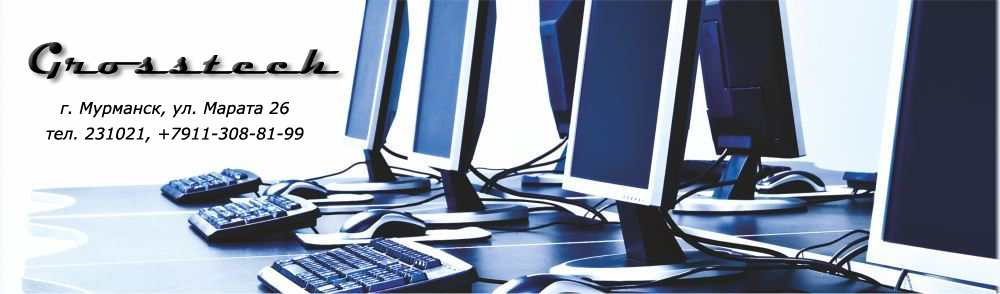
<style>
.page{position:relative;width:1000px;height:294px}
.page>*{position:absolute;margin:0}
.t1{font:16px "Verdana-Italic";color:#000000}
</style>
<div class="page">
<p class="t1" style="left:46px;top:101px;width:258px;height:42px;text-align:center">г. Мурманск, ул. Марата 26<br><br>тел. 231021, +7911-308-81-99</p>
</div>
